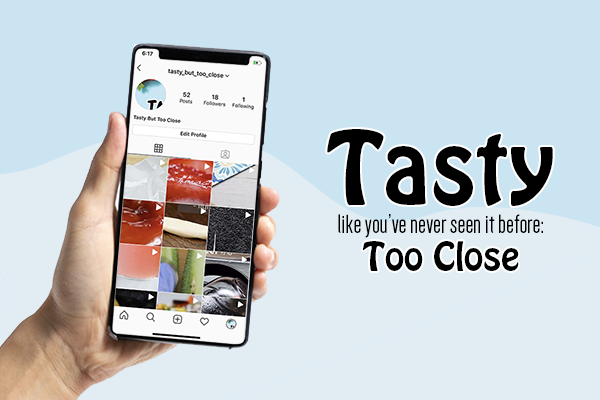
<style>
.page{position:relative;width:600px;height:400px;background:#cae4f1}
.page>*{position:absolute;margin:0}
.t1{font:90px "HoboStd";color:#000000}
.t2{font:27.4px "Dense-Regular";color:#000000}
.t3{font:34.9px "HoboStd";color:#000000}
</style>
<div class="page">
<p class="t1" style="left:327px;top:129px;width:226px;height:77px">Tasty</p>
<p class="t2" style="left:338px;top:214px;width:205px;height:24px">like you’ve never seen it before:</p>
<p class="t3" style="left:363px;top:241px;width:156px;height:30px">Too Close</p>
</div>
